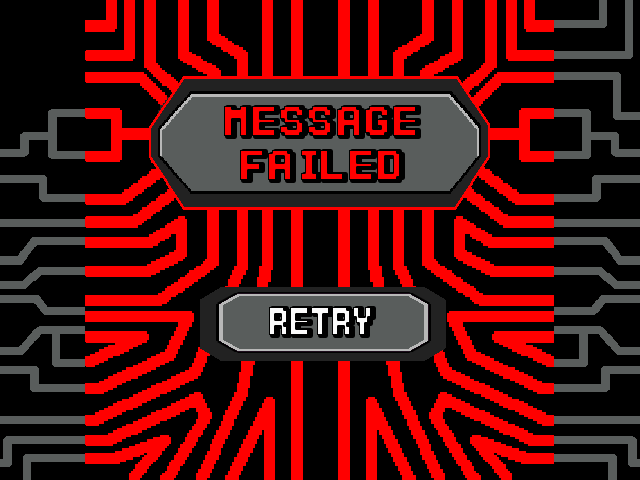
<style>
.page{position:relative;width:640px;height:480px;background:#000000}
.page>*{position:absolute;margin:0}
.t1{font:44.4px/44.4px "Power-Clear-Bold";color:#ff0000;scale:1.15 1}
.t2{font:40px "Power-Clear-Bold";color:#fbfbfb}
</style>
<div class="page">
<p class="t1" style="left:224px;top:106px;width:192px;height:74px;text-align:center">MESSAGE<br>FAILED</p>
<p class="t2" style="left:269px;top:307px;width:102px;height:28px">RETRY</p>
</div>
